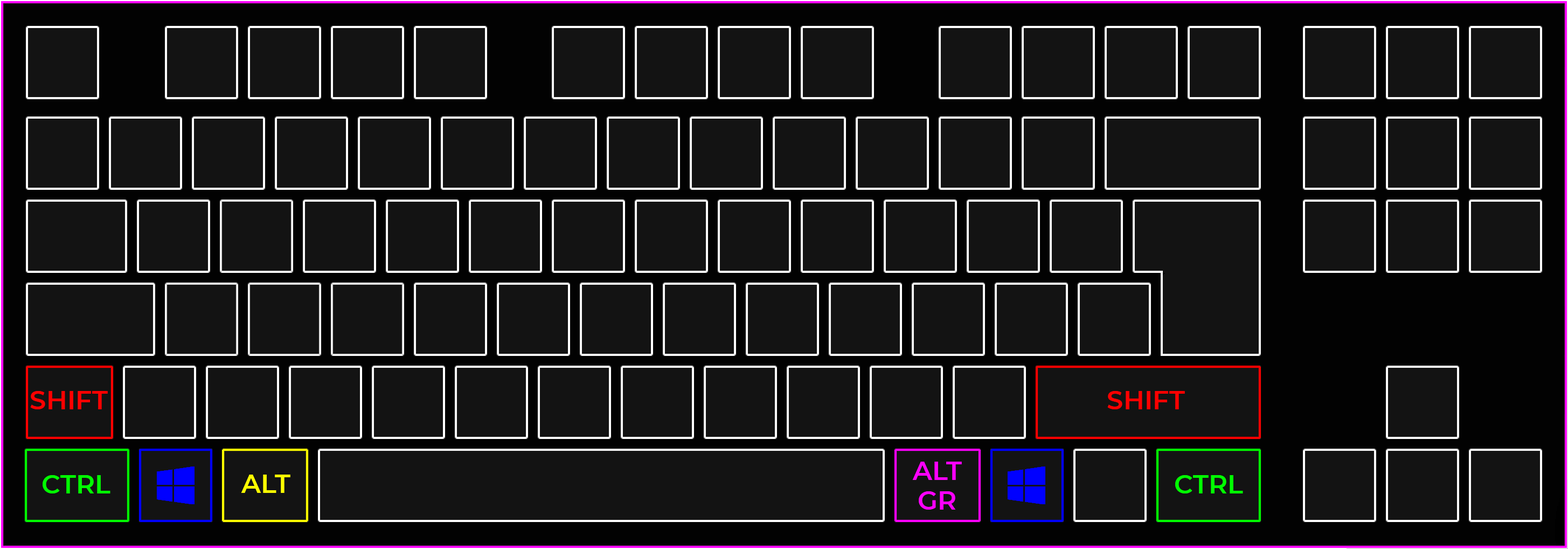
<style>
.page{position:relative;width:1568px;height:549px;background:#131313}
.page>*{position:absolute;margin:0}
.t1{font:25.9px "Montserrat-SemiBold";color:#ff0000}
.t2{font:25.9px/29.6px "Montserrat-SemiBold";color:#ff00ff}
.t3{font:25.9px "Montserrat-SemiBold";color:#00ff00}
.t4{font:25.9px "Montserrat-SemiBold";color:#ffff00}
</style>
<div class="page">
<p class="t1" style="left:30px;top:391px;width:78px;height:18px">SHIFT</p>
<p class="t1" style="left:1107px;top:391px;width:78px;height:18px">SHIFT</p>
<p class="t2" style="left:912px;top:461px;width:50px;height:48px;text-align:center">ALT<br>GR</p>
<p class="t3" style="left:43px;top:475px;width:67px;height:18px">CTRL</p>
<p class="t4" style="left:241px;top:474px;width:49px;height:18px">ALT</p>
<p class="t3" style="left:1175px;top:475px;width:68px;height:18px">CTRL</p>
</div>
